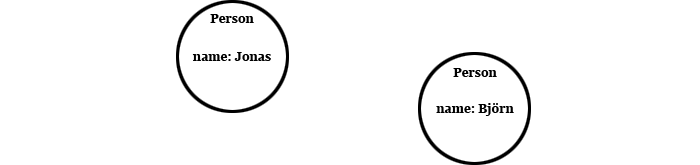
<style>
.page{position:relative;width:700px;height:165px;background:#ffffff}
.page>*{position:absolute;margin:0}
.t1{font:12px "Georgia-Bold";color:#000000}
</style>
<div class="page">
<p class="t1" style="left:210px;top:14px;width:44px;height:9px">Person</p>
<p class="t1" style="left:192px;top:52px;width:79px;height:9px">name: Jonas</p>
<p class="t1" style="left:453px;top:68px;width:44px;height:9px">Person</p>
<p class="t1" style="left:436px;top:103px;width:78px;height:13px">name: Björn</p>
</div>
